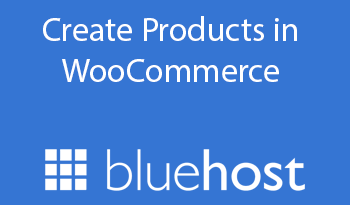
<style>
.page{position:relative;width:350px;height:205px;background:#3575d3}
.page>*{position:absolute;margin:0}
.t1{font:34px "MyriadPro-Regular";color:#ffffff}
</style>
<div class="page">
<p class="t1" style="left:43px;top:16px;width:254px;height:66px;text-align:center">Create Products in WooCommerce</p>
</div>
